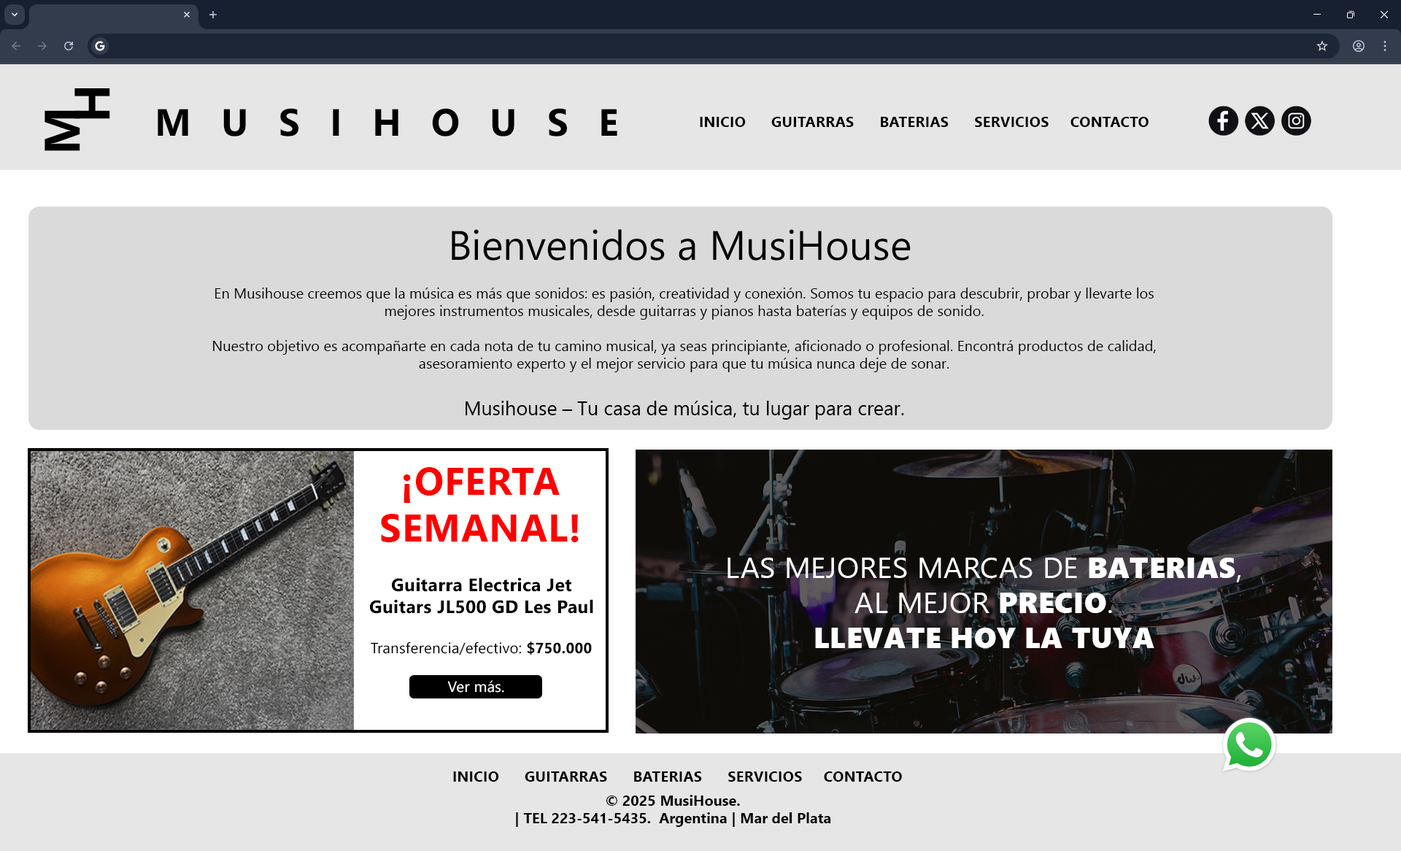
<style>
.page{position:relative;width:1401px;height:851px;background:#e6e6e6}
.page>*{position:absolute;margin:0}
.t1{font:49.9px/30px "SegoeUI-Bold";letter-spacing:0.8em;color:#000000}
.t2{font:37.9px "SegoeUI-Bold";letter-spacing:0.8em;color:#000000}
.t3{font:14.6px "SegoeUI-Bold";letter-spacing:0.015em;color:#000000}
.t4{font:41.1px "SegoeUI";color:#000000}
.t5{font:14.6px "SegoeUI";color:#000000}
.t6{font:19.5px "SegoeUI";color:#000000}
.t7{font:38.9px "SegoeUI-Bold";letter-spacing:0.015em;color:#ff0000}
.t8{font:29.2px "SegoeUI";letter-spacing:0.015em;color:#ffffff}
.t9{font:29.2px "SegoeUIBlack";letter-spacing:0.015em;color:#ffffff}
.t10{font:18px "SegoeUI-Bold";letter-spacing:0.015em;color:#000000}
.t11{font:14.8px "SegoeUI";letter-spacing:0.015em;color:#000000}
.t12{font:14.8px "SegoeUI-Bold";letter-spacing:0.015em;color:#000000}
.t13{font:14.8px "SegoeUI";letter-spacing:0.015em;color:#ffffff}
.t14{font:14.6px "SegoeUI-Bold";color:#000000}
</style>
<div class="page">
<p class="t1" style="left:45px;top:88px;width:65px;height:63px;text-align:center;rotate:-90deg">M<br> H</p>
<p class="t2" style="left:158px;top:108px;width:459px;height:28px">MUSIHOUSE</p>
<p class="t3" style="left:700px;top:117px;width:449px;height:10px">INICIO      GUITARRAS      BATERIAS      SERVICIOS     CONTACTO</p>
<p class="t4" style="left:452px;top:229px;width:459px;height:32px">Bienvenidos a MusiHouse</p>
<p class="t5" style="left:213px;top:288px;width:943px;height:132px;text-align:center"><span class="t6"><br></span><br>En Musihouse creemos que la música es más que sonidos: es pasión, creatividad y conexión. Somos tu espacio para descubrir, probar y llevarte los mejores instrumentos musicales, desde guitarras y pianos hasta baterías y equipos de sonido.<br><br>Nuestro objetivo es acompañarte en cada nota de tu camino musical, ya seas principiante, aficionado o profesional. Encontrá productos de calidad, asesoramiento experto y el mejor servicio para que tu música nunca deje de sonar.<br><span class="t6"><br>Musihouse – Tu casa de música, tu lugar para crear.</span></p>
<p class="t7" style="left:381px;top:467px;width:198px;height:75px;text-align:center">¡OFERTA<br>SEMANAL!</p>
<p class="t8" style="left:728px;top:558px;width:513px;height:90px;text-align:center">LAS MEJORES MARCAS DE <span class="t9">BATERIAS</span>,<br>AL MEJOR <span class="t9">PRECIO</span>.<br><span class="t9">LLEVATE HOY LA TUYA</span></p>
<p class="t10" style="left:370px;top:577px;width:223px;height:37px;text-align:center">Guitarra Electrica Jet<br>Guitars JL500 GD Les Paul</p>
<p class="t11" style="left:371px;top:642px;width:221px;height:13px">Transferencia/efectivo: <span class="t12">$750.000</span></p>
<p class="t13" style="left:447px;top:680px;width:57px;height:13px">Ver más.</p>
<p class="t3" style="left:453px;top:771px;width:449px;height:11px">INICIO      GUITARRAS      BATERIAS      SERVICIOS     CONTACTO</p>
<p class="t14" style="left:516px;top:795px;width:315px;height:32px;text-align:center">© 2025 MusiHouse.<br>| TEL 223-541-5435.  Argentina | Mar del Plata</p>
</div>
